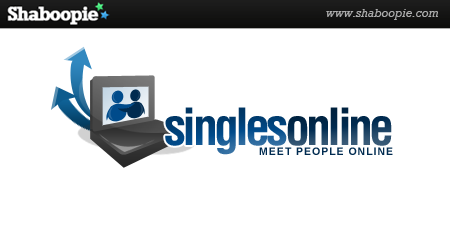
<style>
.page{position:relative;width:450px;height:250px;background:#ffffff}
.page>*{position:absolute;margin:0}
.t1{font:50px "Helvetica-Condensed-Bold";letter-spacing:-0.075em}
.t2{font:10.4px "Arial-BoldMT";letter-spacing:0.1em;color:#002b50}
</style>
<div class="page">
<p class="t1" style="left:165px;top:107px;width:227px;height:48px">singlesonline</p>
<p class="t2" style="left:259px;top:147px;width:134px;height:8px">MEET PEOPLE ONLINE</p>
</div>
